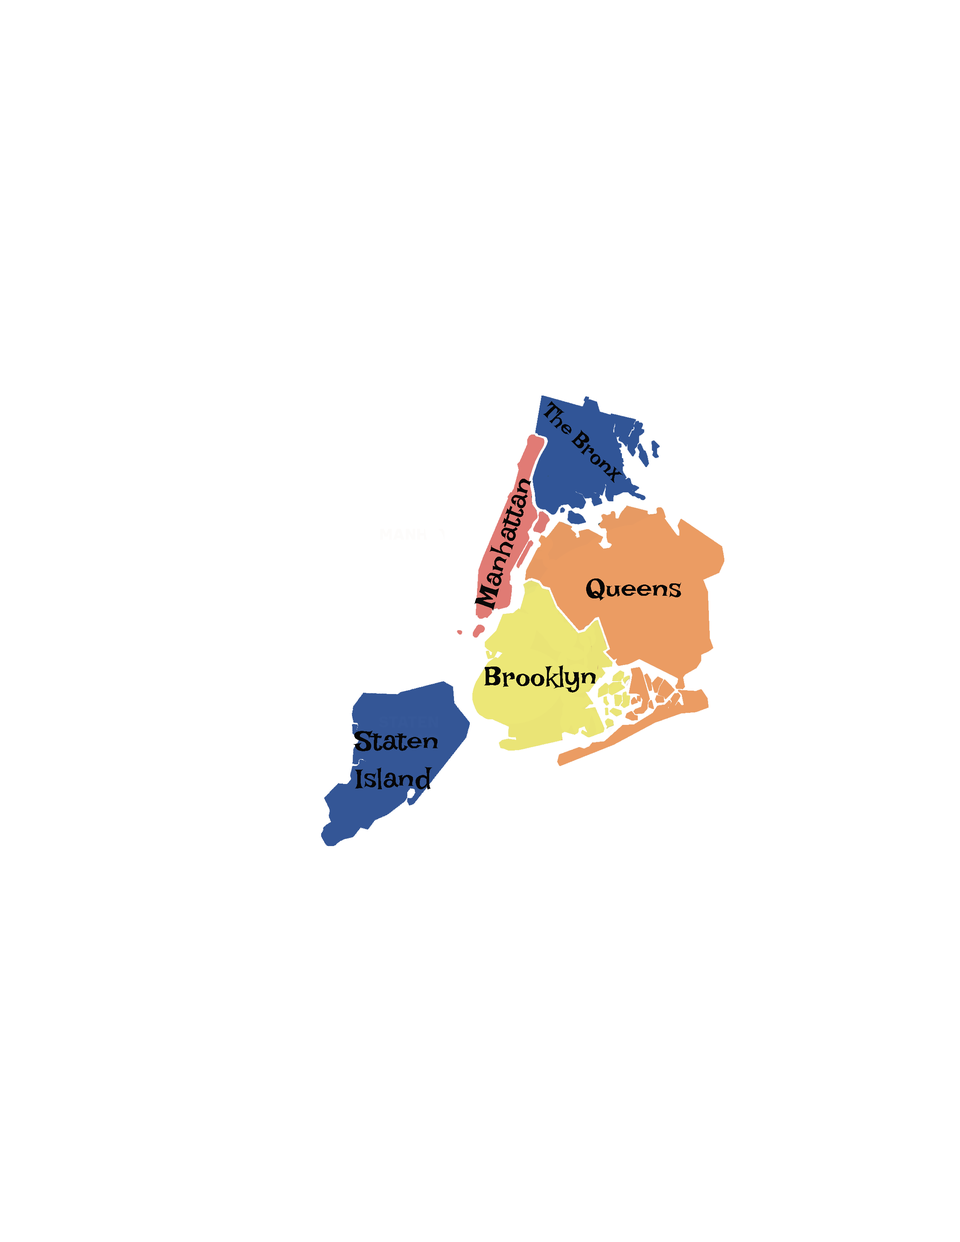
<style>
.page{position:relative;width:960px;height:1242px;background:#ffffff}
.page>*{position:absolute;margin:0}
.t1{font:22px "LakkiReddy";color:#060606}
.t2{font:28.2px "LakkiReddy";color:#060606}
.t3{font:28.2px/37.6px "LakkiReddy";color:#060606}
</style>
<div class="page">
<p class="t1" style="left:543px;top:401px;width:80px;height:82px;rotate:44deg">The Bronx</p>
<p class="t2" style="left:474px;top:479px;width:57px;height:132px;rotate:-72deg">Manhattan</p>
<p class="t2" style="left:586px;top:579px;width:95px;height:22px">Queens</p>
<p class="t2" style="left:483px;top:665px;width:113px;height:28px">Brooklyn</p>
<p class="t3" style="left:353px;top:731px;width:85px;height:59px">Staten <br>Island</p>
</div>
